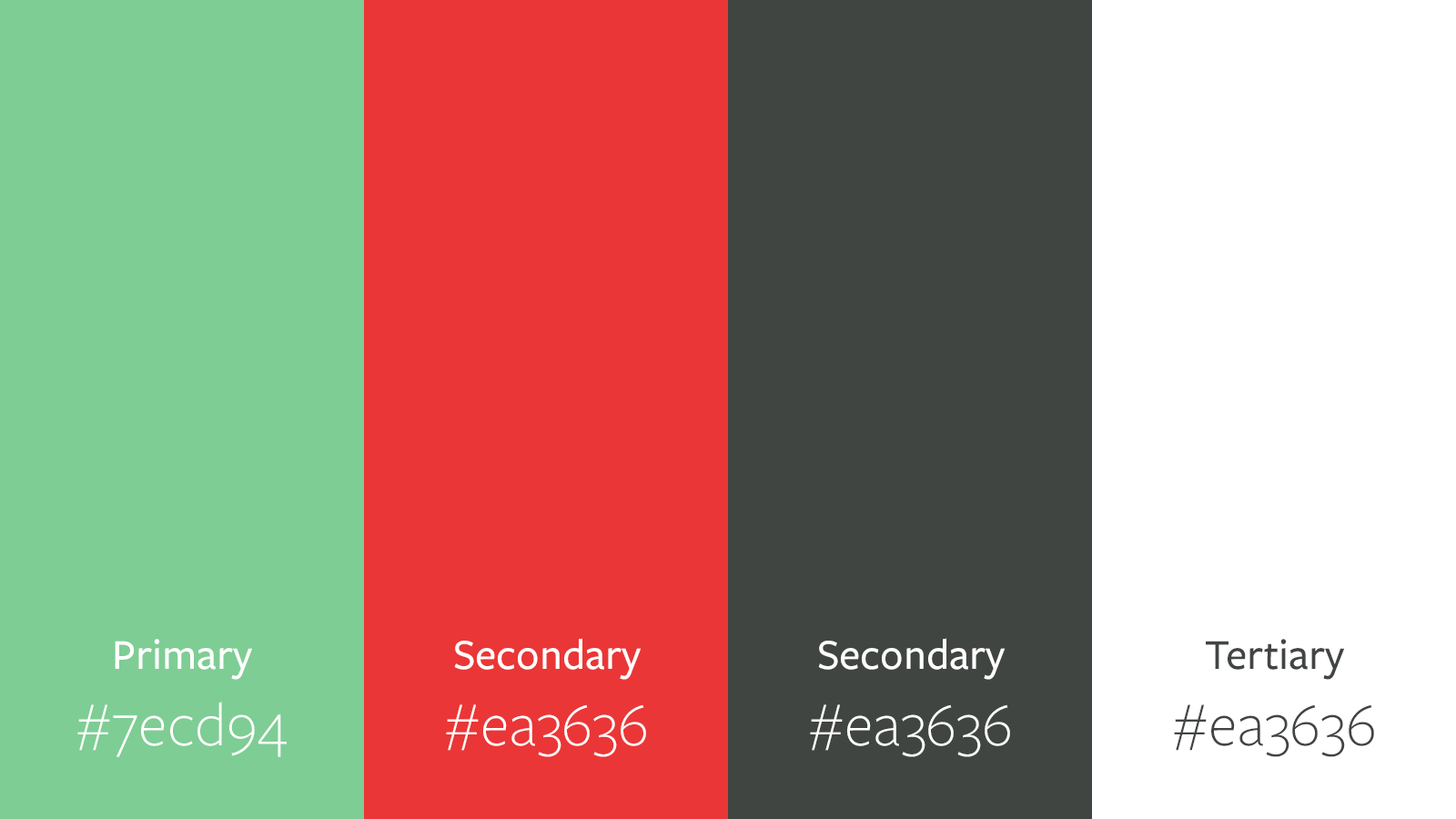
<style>
.page{position:relative;width:1456px;height:819px;background:#ffffff}
.page>*{position:absolute;margin:0}
.t1{font:44.1px "FreightSansProMedium-Regular";color:#ffffff}
.t2{font:63.1px "FreightSansProLight-Regular";color:#ffffff}
.t3{font:44.1px "FreightSansProMedium-Regular";color:#414542}
.t4{font:63.1px "FreightSansProLight-Regular";color:#414542}
</style>
<div class="page">
<p class="t1" style="left:77px;top:639px;width:210px;height:118px;text-align:center">Primary<br><span class="t2">#7ecd94</span></p>
<p class="t1" style="left:446px;top:638px;width:200px;height:119px;text-align:center">Secondary<br><span class="t2">#ea3636</span></p>
<p class="t1" style="left:810px;top:638px;width:200px;height:119px;text-align:center">Secondary<br><span class="t2">#ea3636</span></p>
<p class="t3" style="left:1174px;top:639px;width:200px;height:118px;text-align:center">Tertiary<br><span class="t4">#ea3636</span></p>
</div>
